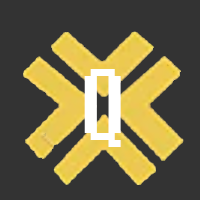
<style>
.page{position:relative;width:200px;height:200px;background:#333333}
.page>*{position:absolute;margin:0}
.t1{font:89.1px "LoRes15OT-Bold";letter-spacing:0.01em;color:#ffffff;scale:1.19 1}
</style>
<div class="page">
<p class="t1" style="left:84px;top:69px;width:37px;height:78px">Q</p>
</div>
